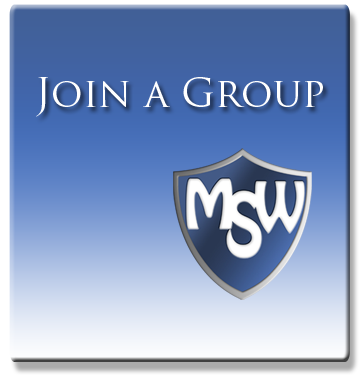
<style>
.page{position:relative;width:364px;height:382px}
.page>*{position:absolute;margin:0}
.t1{font:39.3px "TrajanPro-Regular";color:#ffffff;font-variant:small-caps}
</style>
<div class="page">
<p class="t1" style="left:36px;top:77px;width:287px;height:40px">Join a Group</p>
</div>
